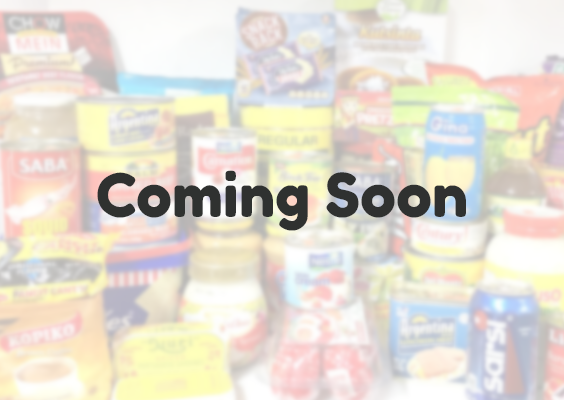
<style>
.page{position:relative;width:564px;height:400px}
.page>*{position:absolute;margin:0}
.t1{font:60px "FredokaOne-Regular";color:#2f3130}
</style>
<div class="page">
<p class="t1" style="left:97px;top:170px;width:369px;height:61px">Coming Soon</p>
</div>
